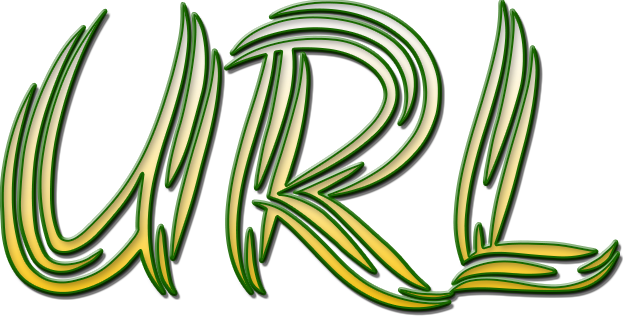
<style>
.page{position:relative;width:623px;height:318px;background:#ffffff}
.page>*{position:absolute;margin:0}
.t1{font:400px "Akronim-Regular"}
</style>
<div class="page">
<p class="t1" style="left:1px;top:0px;width:617px;height:310px">URL</p>
</div>
